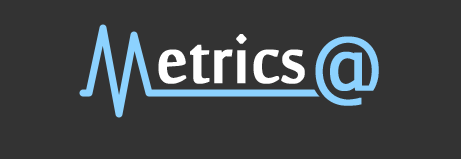
<style>
.page{position:relative;width:461px;height:159px;background:#333333}
.page>*{position:absolute;margin:0}
.t1{font:95px "SakkalMajalla";letter-spacing:-0.01em;color:#ffffff;font-weight:bold;scale:0.92 1}
</style>
<div class="page">
<p class="t1" style="left:158px;top:34px;width:147px;height:50px">etrics</p>
</div>
